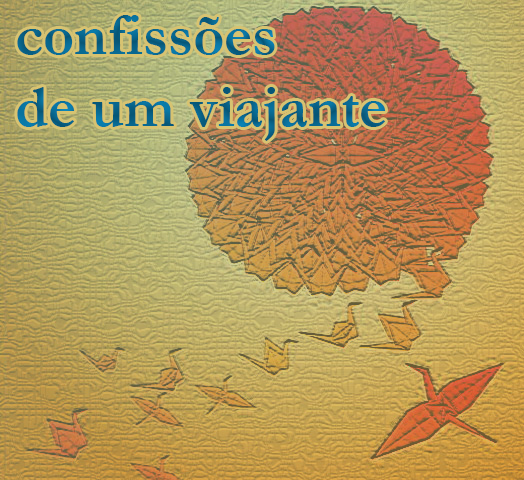
<style>
.page{position:relative;width:524px;height:480px}
.page>*{position:absolute;margin:0}
.t1{font:60px "Garamond-Bold";color:#08678e}
</style>
<div class="page">
<p class="t1" style="left:17px;top:15px;width:369px;height:126px">confissões<br>de um viajante</p>
</div>
